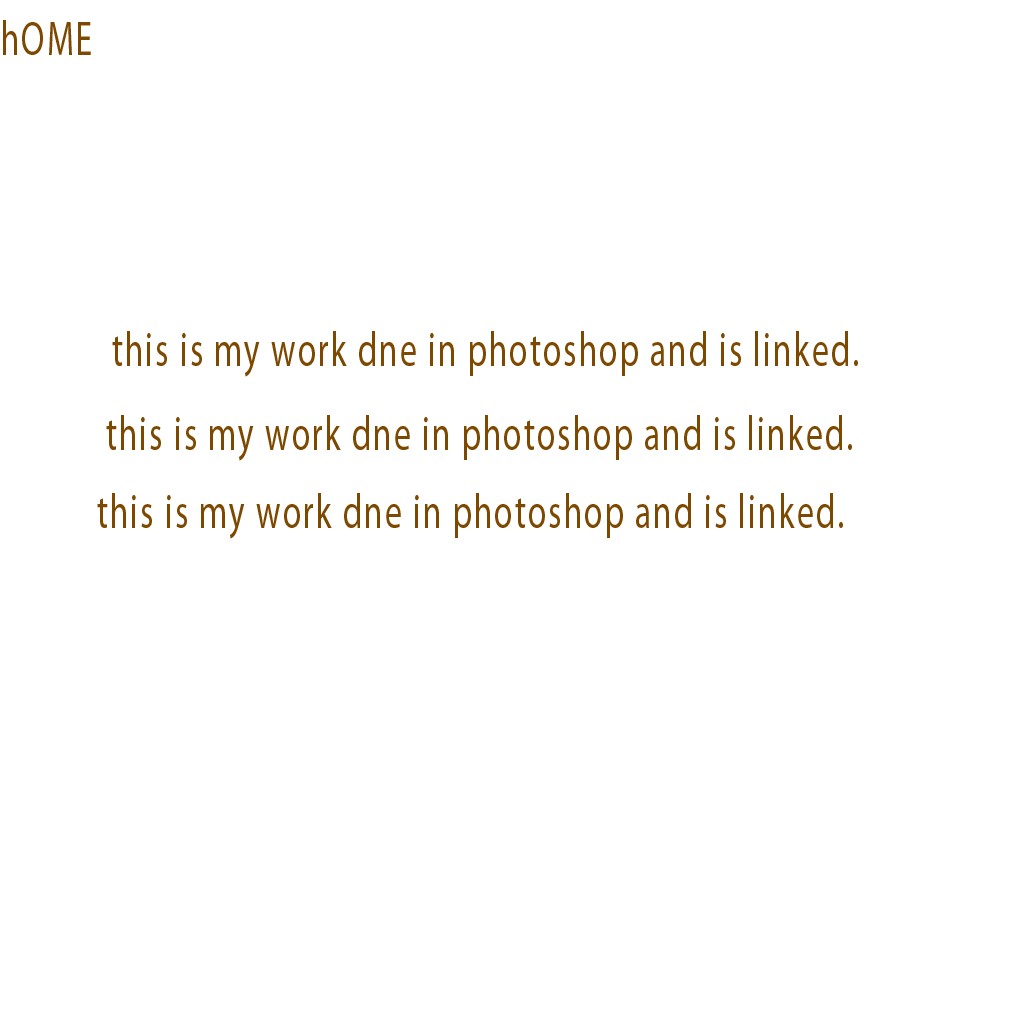
<style>
.page{position:relative;width:1024px;height:1024px;background:#ffffff}
.page>*{position:absolute;margin:0}
.t1{font:48px "MyriadPro-Regular";letter-spacing:0.06em;color:#7d4900;scale:0.7 1}
</style>
<div class="page">
<p class="t1" style="left:3px;top:20px;width:88px;height:35px">hOME</p>
<p class="t1" style="left:112px;top:331px;width:746px;height:46px">this is my work dne in photoshop and is linked.</p>
<p class="t1" style="left:106px;top:415px;width:746px;height:46px">this is my work dne in photoshop and is linked.</p>
<p class="t1" style="left:97px;top:493px;width:746px;height:46px">this is my work dne in photoshop and is linked.</p>
</div>
